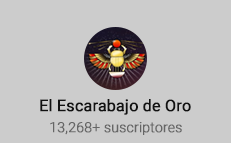
<style>
.page{position:relative;width:231px;height:143px;background:#cccccc}
.page>*{position:absolute;margin:0}
.t1{font:16px "Roboto-Regular";letter-spacing:-0.01em;color:#111111;font-weight:bold}
.t2{font:14px "Roboto-Light";letter-spacing:-0.01em;color:#666666;font-weight:bold}
</style>
<div class="page">
<p class="t1" style="left:40px;top:99px;width:151px;height:16px">El Escarabajo de Oro</p>
<p class="t2" style="left:50px;top:122px;width:132px;height:13px">13,268+ suscriptores</p>
</div>
